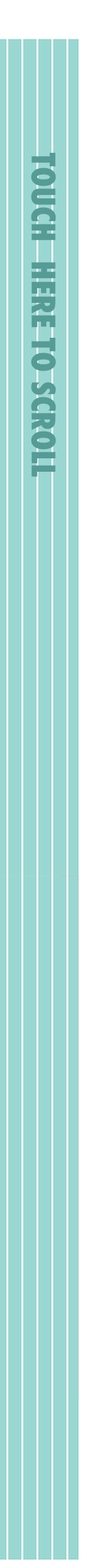
<style>
.page{position:relative;width:87px;height:1568px;background:#9bd7d2}
.page>*{position:absolute;margin:0}
.t1{font:31.5px "Futura-CondensedExtraBold";color:#569b95}
</style>
<div class="page">
<p class="t1" style="left:31px;top:153px;width:25px;height:324px;rotate:90deg">TOUCH  HERE TO SCROLL</p>
</div>
